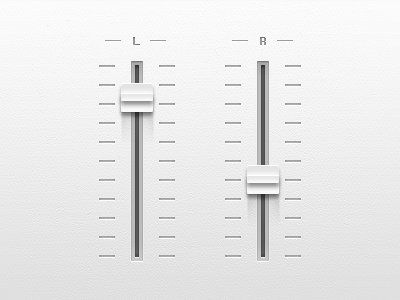
<style>
.page{position:relative;width:400px;height:300px}
.page>*{position:absolute;margin:0}
.t1{font:11px "Helvetica-Bold";letter-spacing:-0.027em}
.t2{font:11px "Helvetica-Bold";letter-spacing:-0.027em;color:#979797}
</style>
<div class="page">
<p class="t1" style="left:133px;top:37px;width:7px;height:8px">L</p>
<p class="t2" style="left:260px;top:37px;width:6px;height:8px">R</p>
</div>
